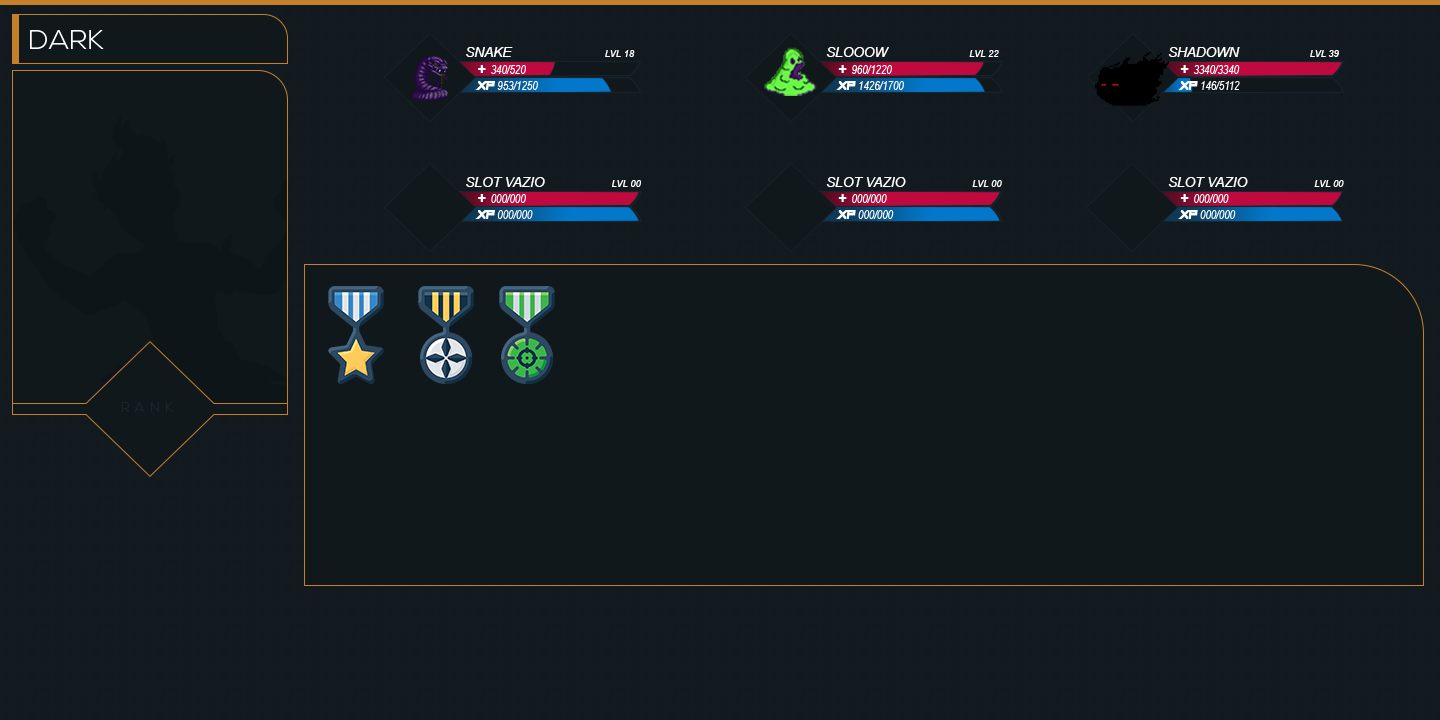
<style>
.page{position:relative;width:1440px;height:720px;background:#10181c}
.page>*{position:absolute;margin:0}
.t1{font:27px "NexaLight";color:#ffffff;text-transform:uppercase;scale:1.06 1}
.t2{font:9.4px "Arial-ItalicMT";color:#ffffff;text-transform:uppercase}
.t3{font:13.5px "Arial-ItalicMT";color:#ffffff;text-transform:uppercase}
.t4{font:11.8px "ArialNarrow-Italic";color:#ffffff;text-transform:uppercase}
.t5{font:13.5px "Arial-Black";color:#ffffff;text-transform:uppercase}
.t6{font:11.8px "PlayPretend";color:#ffffff;text-transform:uppercase}
.t7{font:13px "NexaLight";letter-spacing:0.46em;color:#18252d;text-transform:uppercase}
</style>
<div class="page">
<p class="t1" style="left:30px;top:30px;width:74px;height:19px">Dark</p>
<p class="t2" style="left:466px;top:47px;width:169px;height:10px"><span class="t3">Snake                         </span>lvl 18</p>
<p class="t3" style="left:826px;top:47px;width:173px;height:10px">SLOOOW                      <span class="t2">lvl 22</span></p>
<p class="t3" style="left:1168px;top:47px;width:171px;height:10px">SHADOWN                   <span class="t2">lvl 39</span></p>
<p class="t4" style="left:478px;top:65px;width:48px;height:9px"><span class="t5">+ </span>340/520</p>
<p class="t4" style="left:838px;top:65px;width:54px;height:9px"><span class="t5">+ </span>960/1220</p>
<p class="t4" style="left:1180px;top:65px;width:60px;height:9px"><span class="t5">+ </span>3340/3340</p>
<p class="t4" style="left:475px;top:81px;width:63px;height:9px"><span class="t6">XP </span>953/1250</p>
<p class="t4" style="left:836px;top:81px;width:68px;height:9px"><span class="t6">XP </span>1426/1700</p>
<p class="t4" style="left:1178px;top:81px;width:62px;height:9px"><span class="t6">XP </span>146/5112</p>
<p class="t3" style="left:466px;top:177px;width:175px;height:10px">Slot VAZIO                  <span class="t2">lvl 00</span></p>
<p class="t3" style="left:826px;top:177px;width:176px;height:10px">Slot VAZIO                  <span class="t2">lvl 00</span></p>
<p class="t3" style="left:1168px;top:177px;width:176px;height:10px">Slot VAZIO                  <span class="t2">lvl 00</span></p>
<p class="t4" style="left:478px;top:194px;width:48px;height:9px"><span class="t5">+ </span>000/000</p>
<p class="t4" style="left:838px;top:194px;width:49px;height:9px"><span class="t5">+ </span>000/000</p>
<p class="t4" style="left:1180px;top:194px;width:49px;height:9px"><span class="t5">+ </span>000/000</p>
<p class="t4" style="left:475px;top:210px;width:58px;height:9px"><span class="t6">XP </span>000/000</p>
<p class="t4" style="left:836px;top:210px;width:58px;height:9px"><span class="t6">XP </span>000/000</p>
<p class="t4" style="left:1178px;top:210px;width:58px;height:9px"><span class="t6">XP </span>000/000</p>
<p class="t7" style="left:121px;top:402px;width:52px;height:10px">RANK</p>
</div>
